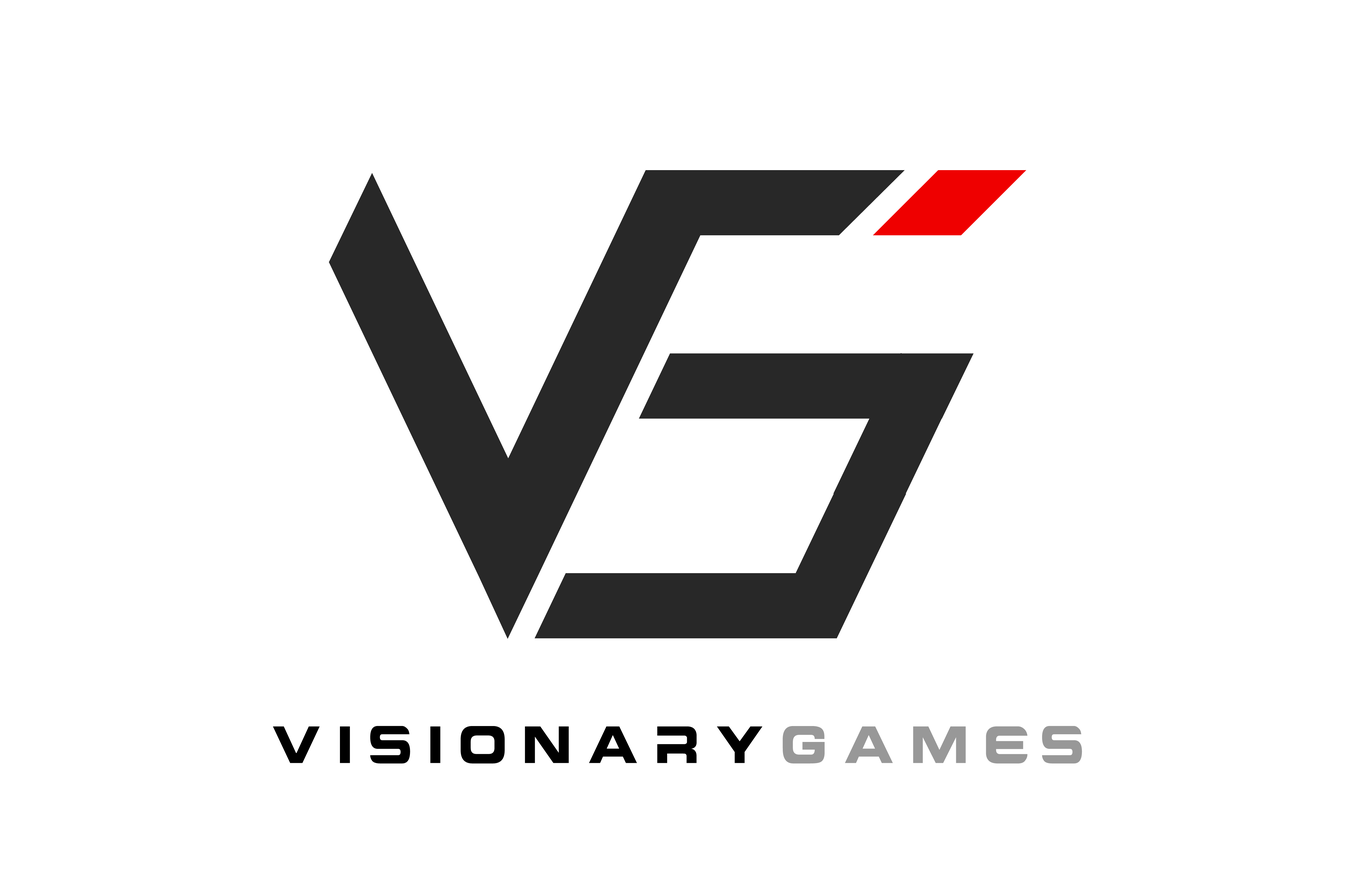
<style>
.page{position:relative;width:1355px;height:880px;background:#ffffff}
.page>*{position:absolute;margin:0}
.t1{font:50.5px "Criovision-Font";letter-spacing:0.26em;color:#000000;scale:0.88 1}
.t2{font:50.5px "Criovision-Font";letter-spacing:0.26em;color:#989898;scale:0.88 1}
</style>
<div class="page">
<p class="t1" style="left:273px;top:726px;width:809px;height:38px">visionary<span class="t2">games</span></p>
</div>
